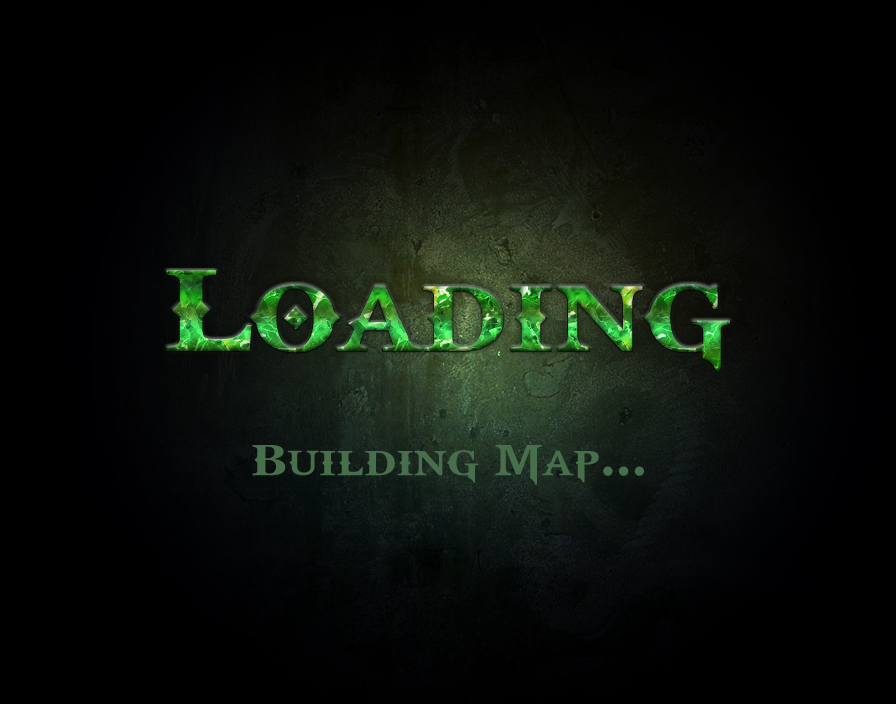
<style>
.page{position:relative;width:896px;height:704px}
.page>*{position:absolute;margin:0}
.t1{font:130px "GodOfWar"}
.t2{font:48px "GodOfWar";color:#486f4b}
</style>
<div class="page">
<p class="t1" style="left:166px;top:270px;width:564px;height:102px">Loading</p>
<p class="t2" style="left:252px;top:445px;width:392px;height:40px">Building Map...</p>
</div>
